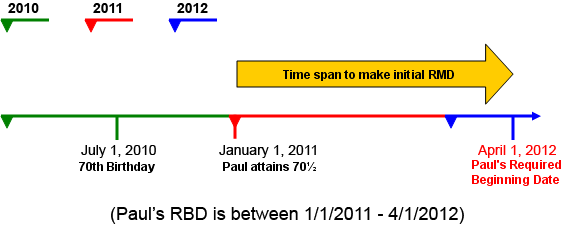
<style>
.page{position:relative;width:577px;height:234px;background:#ffffff}
.page>*{position:absolute;margin:0}
.t1{font:14px "Arial-BoldMT";color:#000000}
.t2{font:14px "ArialMT";color:#000000}
.t3{font:14px "ArialMT";color:#fe0000}
.t4{font:18px "ArialMT";color:#000000}
</style>
<div class="page">
<p class="t1" style="left:8px;top:3px;width:31px;height:10px">2010</p>
<p class="t1" style="left:93px;top:3px;width:29px;height:10px">2011</p>
<p class="t1" style="left:177px;top:3px;width:31px;height:10px">2012</p>
<p class="t2" style="left:81px;top:145px;width:75px;height:13px">July 1, 2010</p>
<p class="t2" style="left:219px;top:145px;width:97px;height:13px">January 1, 2011</p>
<p class="t3" style="left:478px;top:145px;width:78px;height:13px">April 1, 2012</p>
<p class="t4" style="left:111px;top:207px;width:353px;height:17px">(Paul’s RBD is between 1/1/2011 - 4/1/2012)</p>
</div>
